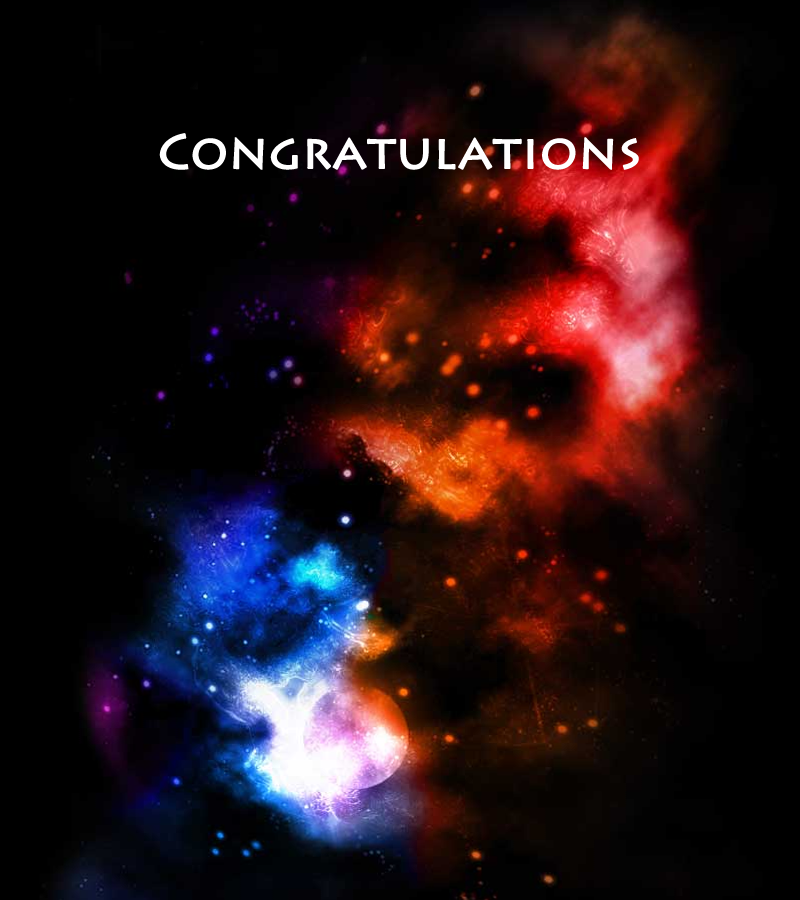
<style>
.page{position:relative;width:800px;height:900px;background:#000000}
.page>*{position:absolute;margin:0}
.t1{font:48px "LithosPro-Regular";color:#ffffff;font-weight:bold}
</style>
<div class="page">
<p class="t1" style="left:159px;top:133px;width:480px;height:37px">Congratulations</p>
</div>
